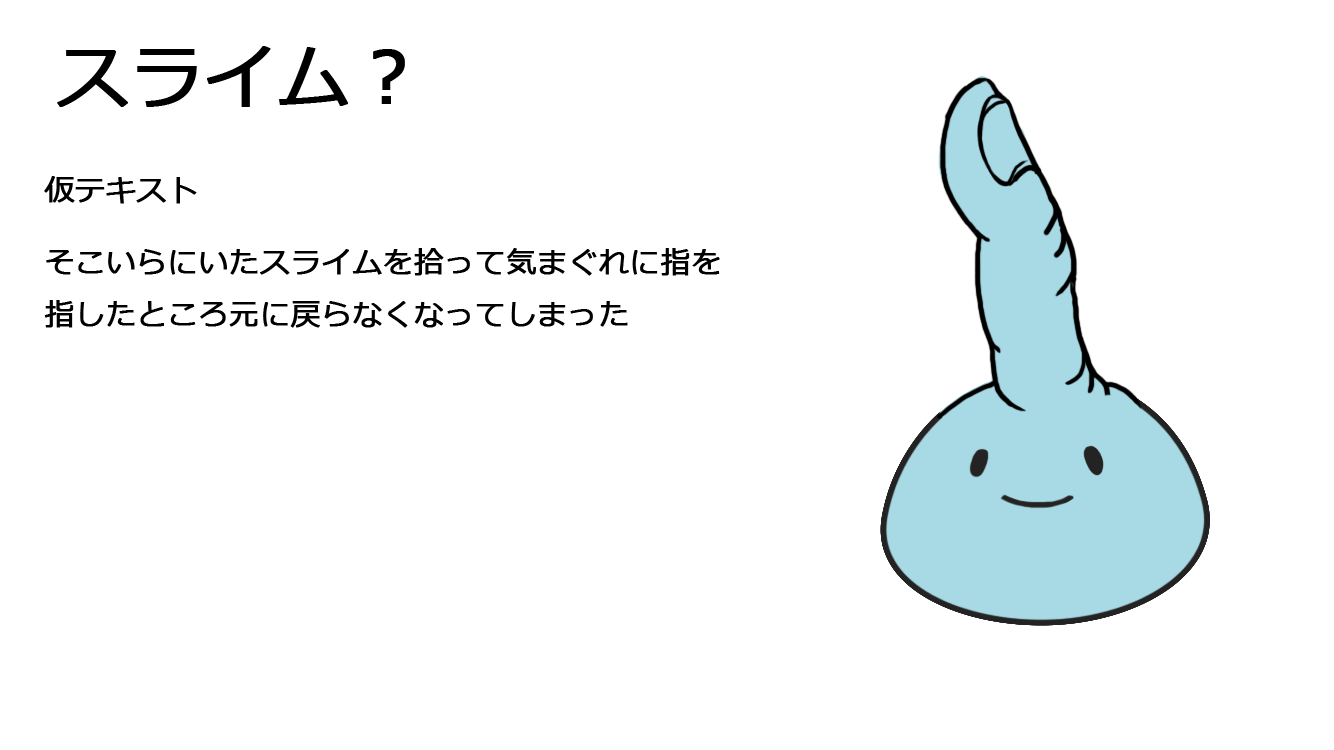
<style>
.page{position:relative;width:1334px;height:750px;background:#ffffff}
.page>*{position:absolute;margin:0}
.t1{font:72px "Meiryo";color:#000000;font-weight:bold}
.t2{font:30px "Meiryo";color:#000000;font-weight:bold}
</style>
<div class="page">
<p class="t1" style="left:57px;top:46px;width:348px;height:61px">スライム？</p>
<p class="t2" style="left:44px;top:176px;width:676px;height:152px">仮テキスト<br><br>そこいらにいたスライムを拾って気まぐれに指を<br>指したところ元に戻らなくなってしまった</p>
</div>
